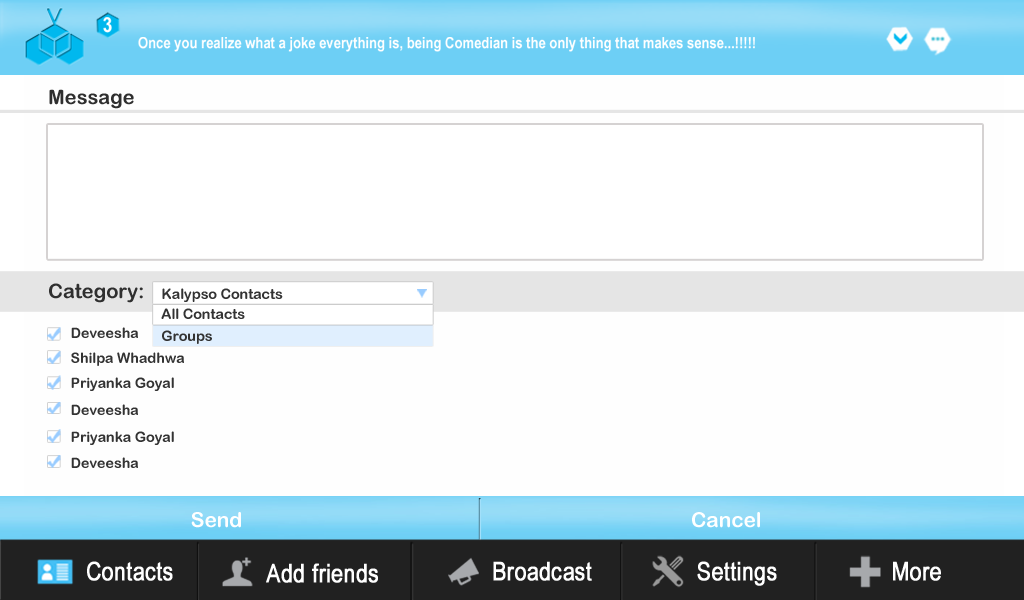
<style>
.page{position:relative;width:1024px;height:600px;background:#fefefe}
.page>*{position:absolute;margin:0}
.t1{font:21.2px "ArialNarrow-Bold";color:#ffffff}
.t2{font:15.9px "ArialNarrow-Bold";color:#ffffff}
.t3{font:20px "ArialRoundedMTBold";color:#2f2f2f}
.t4{font:14.2px "ArialRoundedMTBold";color:#333333}
.t5{font:20.7px "ArialRoundedMTBold";color:#ffffff}
.t6{font:25.4px "ArialNarrow";color:#ffffff;font-weight:bold}
</style>
<div class="page">
<p class="t1" style="left:103px;top:17px;width:9px;height:16px">3</p>
<p class="t2" style="left:138px;top:37px;width:617px;height:15px">Once you realize what a joke everything is, being Comedian is the only thing that makes sense...!!!!!</p>
<p class="t3" style="left:49px;top:89px;width:85px;height:20px">Message</p>
<p class="t3" style="left:49px;top:283px;width:94px;height:20px">Category:</p>
<p class="t4" style="left:162px;top:288px;width:121px;height:14px">Kalypso Contacts</p>
<p class="t4" style="left:161px;top:308px;width:84px;height:11px">All Contacts</p>
<p class="t4" style="left:71px;top:327px;width:67px;height:11px">Deveesha</p>
<p class="t4" style="left:162px;top:330px;width:50px;height:14px">Groups</p>
<p class="t4" style="left:71px;top:352px;width:113px;height:14px">Shilpa Whadhwa</p>
<p class="t4" style="left:71px;top:377px;width:103px;height:14px">Priyanka Goyal</p>
<p class="t4" style="left:71px;top:404px;width:67px;height:11px">Deveesha</p>
<p class="t4" style="left:71px;top:431px;width:103px;height:14px">Priyanka Goyal</p>
<p class="t4" style="left:71px;top:457px;width:67px;height:11px">Deveesha</p>
<p class="t5" style="left:191px;top:512px;width:50px;height:16px">Send</p>
<p class="t5" style="left:692px;top:512px;width:68px;height:16px">Cancel</p>
<p class="t6" style="left:87px;top:561px;width:86px;height:20px">Contacts</p>
<p class="t6" style="left:266px;top:563px;width:112px;height:20px">Add friends</p>
<p class="t6" style="left:493px;top:561px;width:99px;height:20px">Broadcast</p>
<p class="t6" style="left:697px;top:561px;width:80px;height:25px">Settings</p>
<p class="t6" style="left:893px;top:561px;width:48px;height:20px">More</p>
</div>
